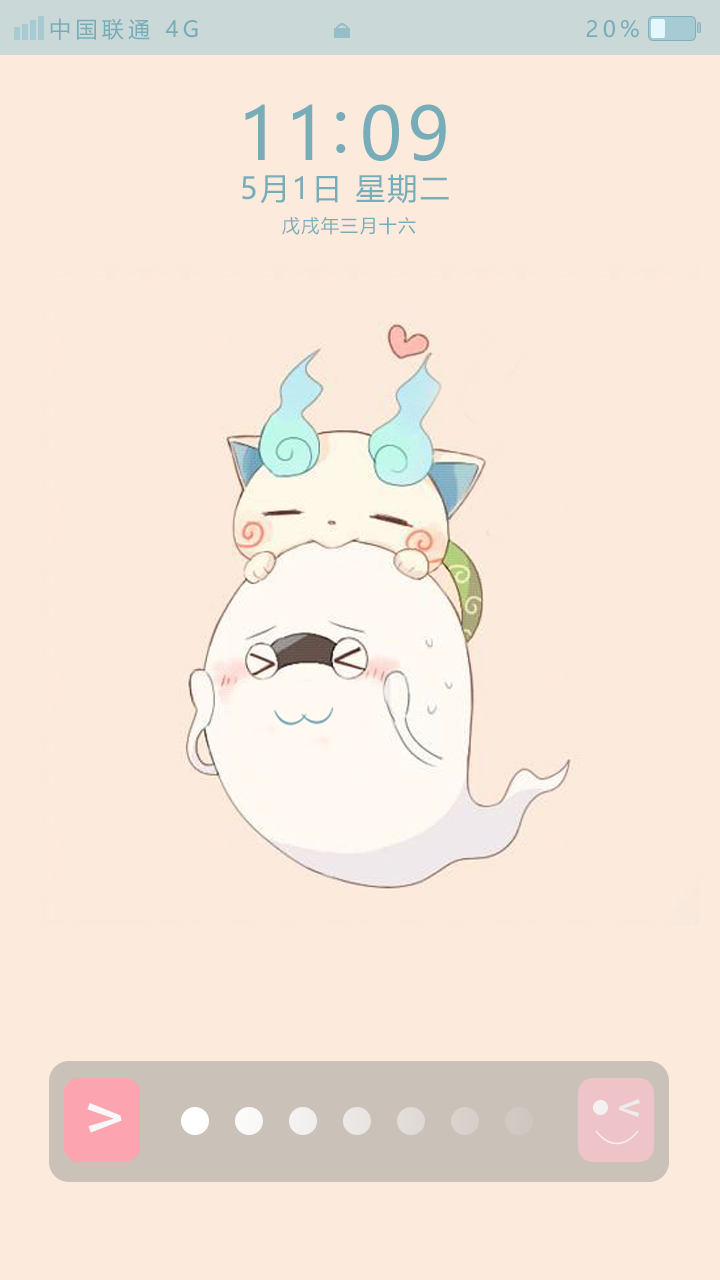
<style>
.page{position:relative;width:720px;height:1280px;background:#fceadc}
.page>*{position:absolute;margin:0}
.t1{font:22px "MicrosoftYaHei";letter-spacing:0.2em;color:#77acb9}
.t2{font:72px "MicrosoftYaHei";letter-spacing:0.075em;color:#77acb9}
.t3{font:30px "MicrosoftYaHei";letter-spacing:0.075em;color:#77acb9}
.t4{font:18px "MicrosoftYaHei";letter-spacing:0.075em;color:#77acb9}
</style>
<div class="page">
<p class="t1" style="left:50px;top:18px;width:589px;height:22px">中国联通 4G                                   20%</p>
<p class="t2" style="left:245px;top:104px;width:201px;height:57px">11 09</p>
<p class="t2" style="left:336px;top:112px;width:10px;height:41px">:</p>
<p class="t3" style="left:242px;top:174px;width:207px;height:30px">5月1日 星期二</p>
<p class="t4" style="left:282px;top:217px;width:134px;height:18px">戊戌年三月十六</p>
</div>
